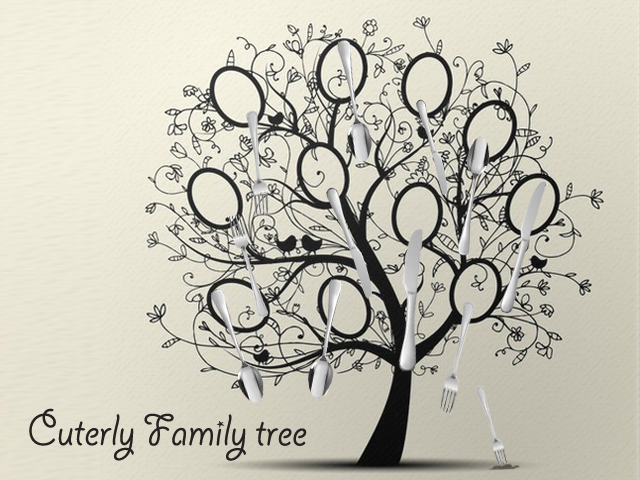
<style>
.page{position:relative;width:640px;height:480px}
.page>*{position:absolute;margin:0}
.t1{font:49.4px "GiddyupStd";color:#262221}
</style>
<div class="page">
<p class="t1" style="left:29px;top:408px;width:278px;height:53px">Cuterly Family tree</p>
</div>
